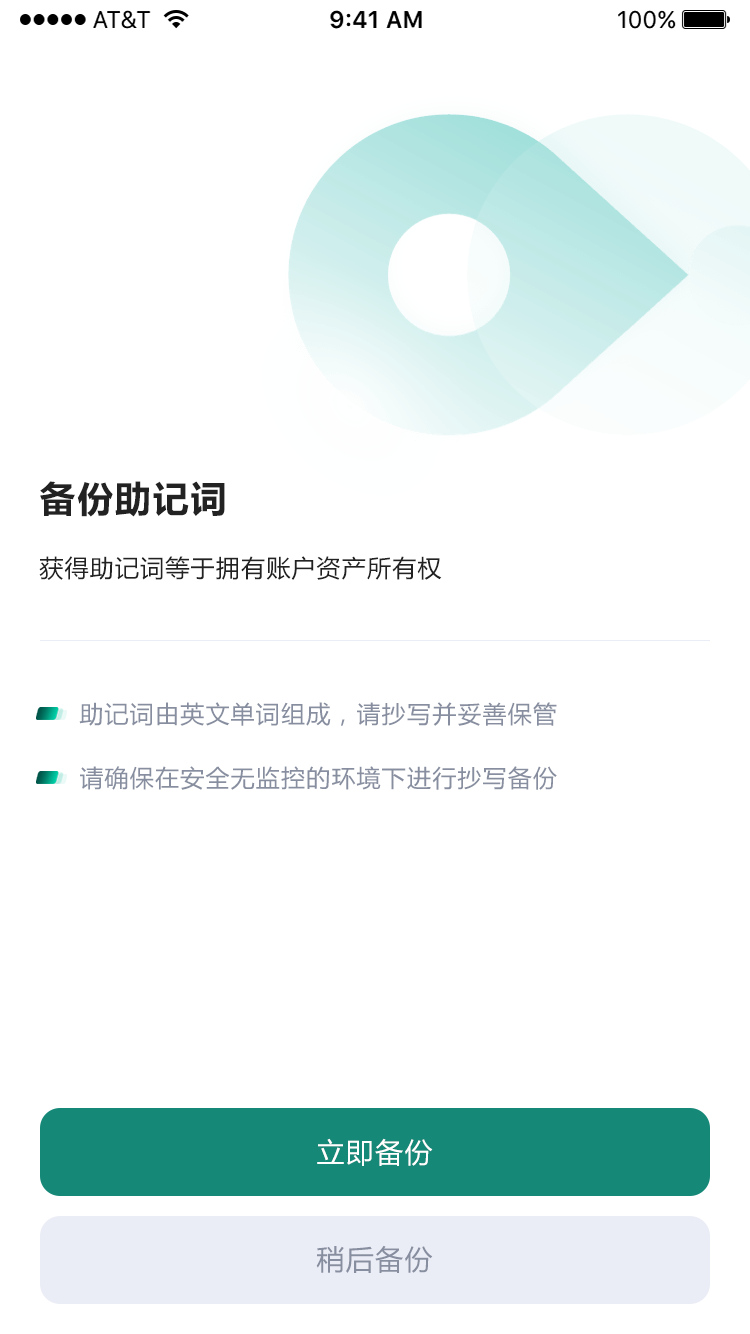
<style>
.page{position:relative;width:750px;height:1334px;background:#ffffff}
.page>*{position:absolute;margin:0}
.t1{font:36px "MicrosoftYaHei-Bold";letter-spacing:0.05em;color:#222222}
.t2{font:24px "MicrosoftYaHei";letter-spacing:0.05em;color:#222222}
.t3{font:24px "MicrosoftYaHei";letter-spacing:0.05em;color:#878e9f}
.t4{font:28px "MicrosoftYaHei";letter-spacing:0.05em;color:#ffffff}
.t5{font:28px "MicrosoftYaHei";letter-spacing:0.05em;color:#878e9f}
</style>
<div class="page">
<p class="t1" style="left:40px;top:481px;width:185px;height:36px">备份助记词</p>
<p class="t2" style="left:39px;top:556px;width:403px;height:24px">获得助记词等于拥有账户资产所有权</p>
<p class="t3" style="left:79px;top:702px;width:478px;height:24px">助记词由英文单词组成，请抄写并妥善保管</p>
<p class="t3" style="left:80px;top:766px;width:477px;height:24px">请确保在安全无监控的环境下进行抄写备份</p>
<p class="t4" style="left:317px;top:1138px;width:116px;height:28px">立即备份</p>
<p class="t5" style="left:316px;top:1245px;width:117px;height:28px">稍后备份</p>
</div>
